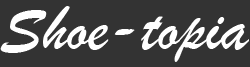
<style>
.page{position:relative;width:250px;height:67px;background:#333333}
.page>*{position:absolute;margin:0}
.t1{font:66.7px "BrushScriptMT";color:#ffffff}
</style>
<div class="page">
<p class="t1" style="left:0px;top:6px;width:249px;height:56px">Shoe-topia</p>
</div>
